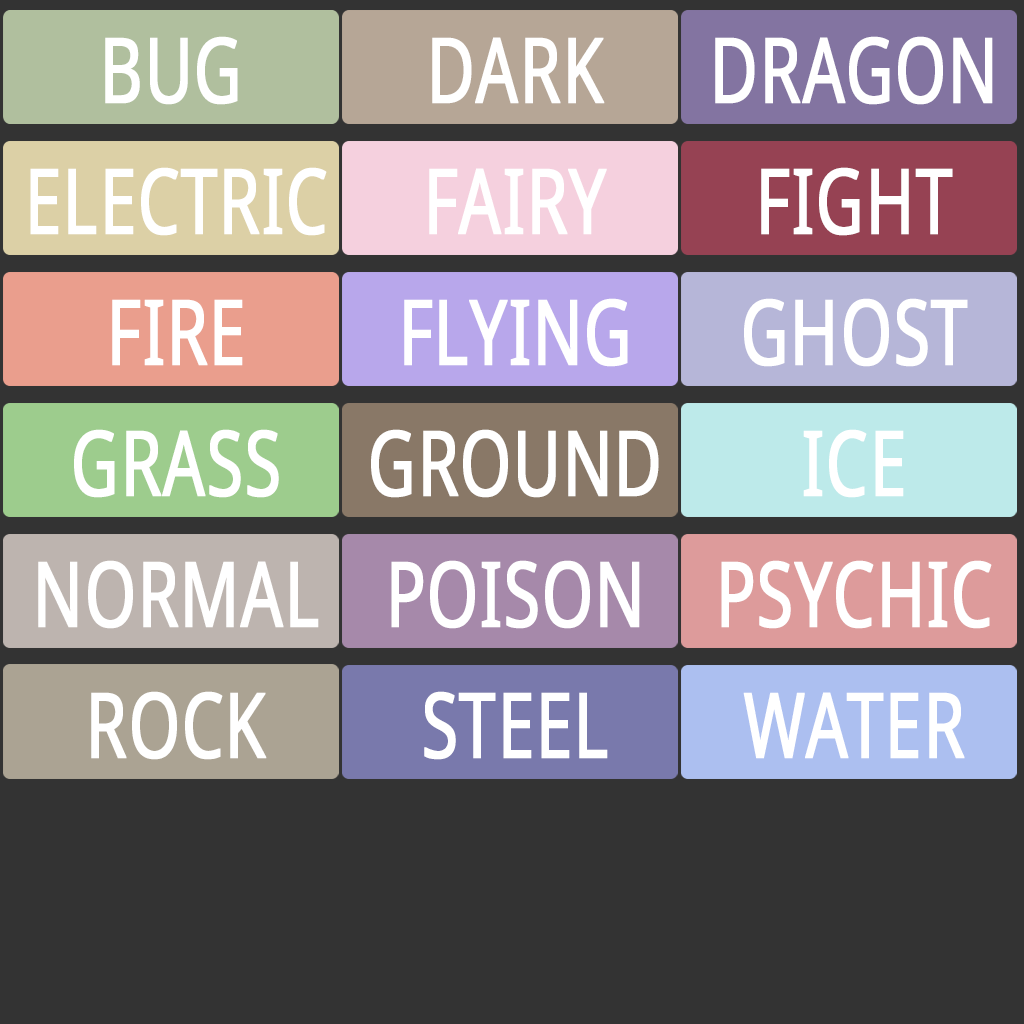
<style>
.page{position:relative;width:1024px;height:1024px;background:#333333}
.page>*{position:absolute;margin:0}
.t1{font:90px "NotoSans";color:#ffffff;font-weight:bold;scale:0.73 1}
</style>
<div class="page">
<p class="t1" style="left:105px;top:36px;width:133px;height:69px">BUG</p>
<p class="t1" style="left:432px;top:37px;width:173px;height:67px">DARK</p>
<p class="t1" style="left:715px;top:36px;width:278px;height:69px">DRAGON</p>
<p class="t1" style="left:30px;top:167px;width:297px;height:69px">ELECTRIC</p>
<p class="t1" style="left:429px;top:168px;width:178px;height:67px">FAIRY</p>
<p class="t1" style="left:761px;top:167px;width:192px;height:69px">FIGHT</p>
<p class="t1" style="left:112px;top:299px;width:131px;height:67px">FIRE</p>
<p class="t1" style="left:404px;top:298px;width:224px;height:69px">FLYING</p>
<p class="t1" style="left:744px;top:298px;width:224px;height:69px">GHOST</p>
<p class="t1" style="left:74px;top:429px;width:205px;height:69px">GRASS</p>
<p class="t1" style="left:371px;top:429px;width:288px;height:69px">GROUND</p>
<p class="t1" style="left:803px;top:429px;width:101px;height:69px">ICE</p>
<p class="t1" style="left:38px;top:560px;width:281px;height:69px">NORMAL</p>
<p class="t1" style="left:391px;top:560px;width:249px;height:69px">POISON</p>
<p class="t1" style="left:721px;top:560px;width:271px;height:69px">PSYCHIC</p>
<p class="t1" style="left:91px;top:691px;width:176px;height:69px">ROCK</p>
<p class="t1" style="left:424px;top:691px;width:184px;height:69px">STEEL</p>
<p class="t1" style="left:743px;top:692px;width:222px;height:67px">WATER</p>
</div>
